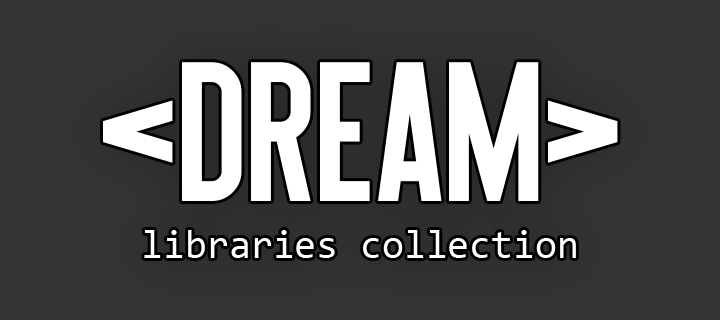
<style>
.page{position:relative;width:720px;height:320px;background:#333333}
.page>*{position:absolute;margin:0}
.t1{font:202.6px "QueenofClubs";color:#ffffff}
.t2{font:39.8px "Consolas";color:#ffffff}
</style>
<div class="page">
<p class="t1" style="left:103px;top:62px;width:515px;height:139px">&lt;DREAM&gt;</p>
<p class="t2" style="left:144px;top:230px;width:432px;height:28px">libraries collection</p>
</div>
